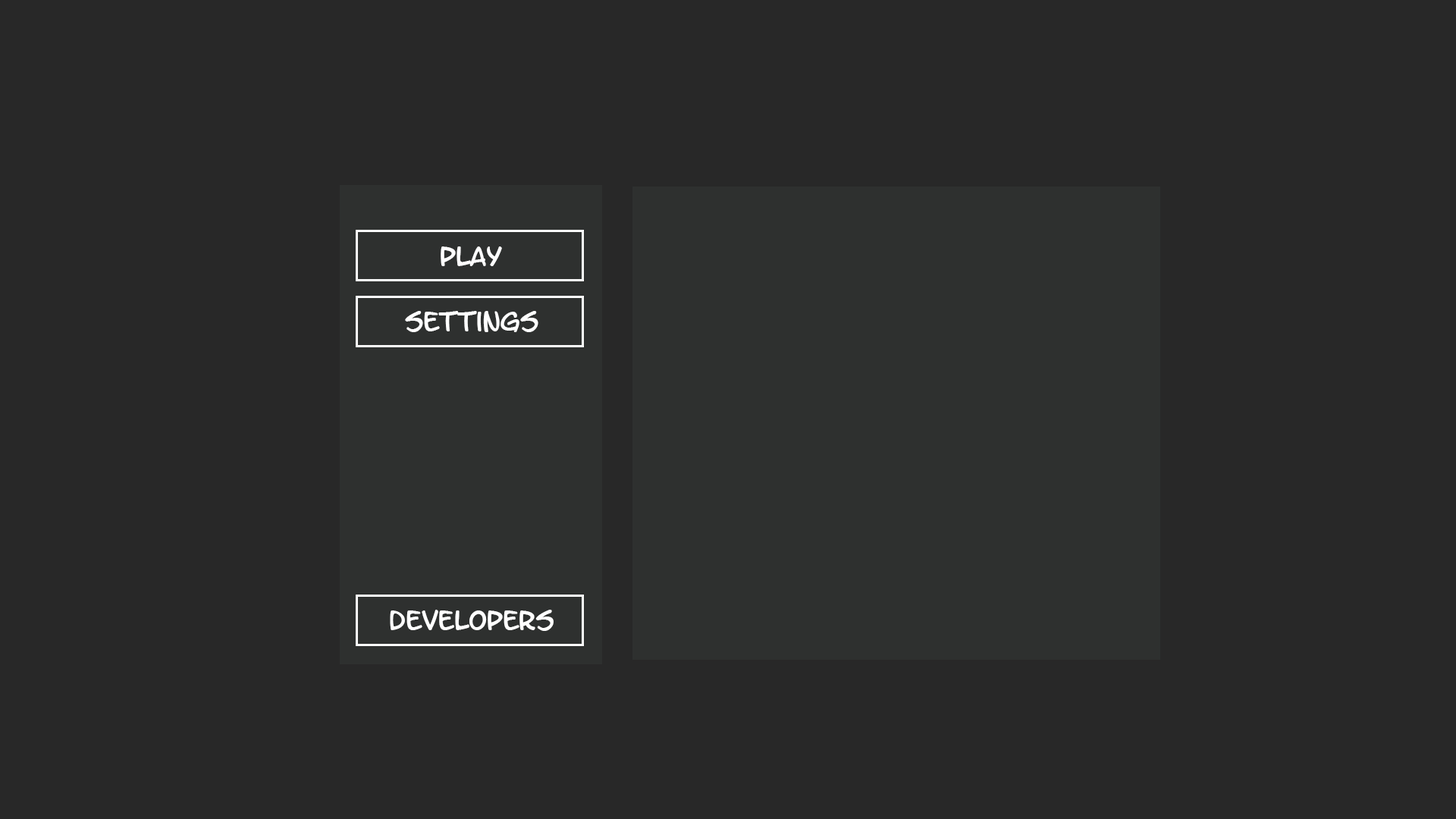
<style>
.page{position:relative;width:1456px;height:819px;background:#282828}
.page>*{position:absolute;margin:0}
.t1{font:22.7px "LetterOMatic";color:#ffffff}
</style>
<div class="page">
<p class="t1" style="left:441px;top:246px;width:61px;height:20px">play</p>
<p class="t1" style="left:405px;top:311px;width:133px;height:21px">settings</p>
<p class="t1" style="left:390px;top:610px;width:164px;height:21px">deVELOPERS</p>
</div>
